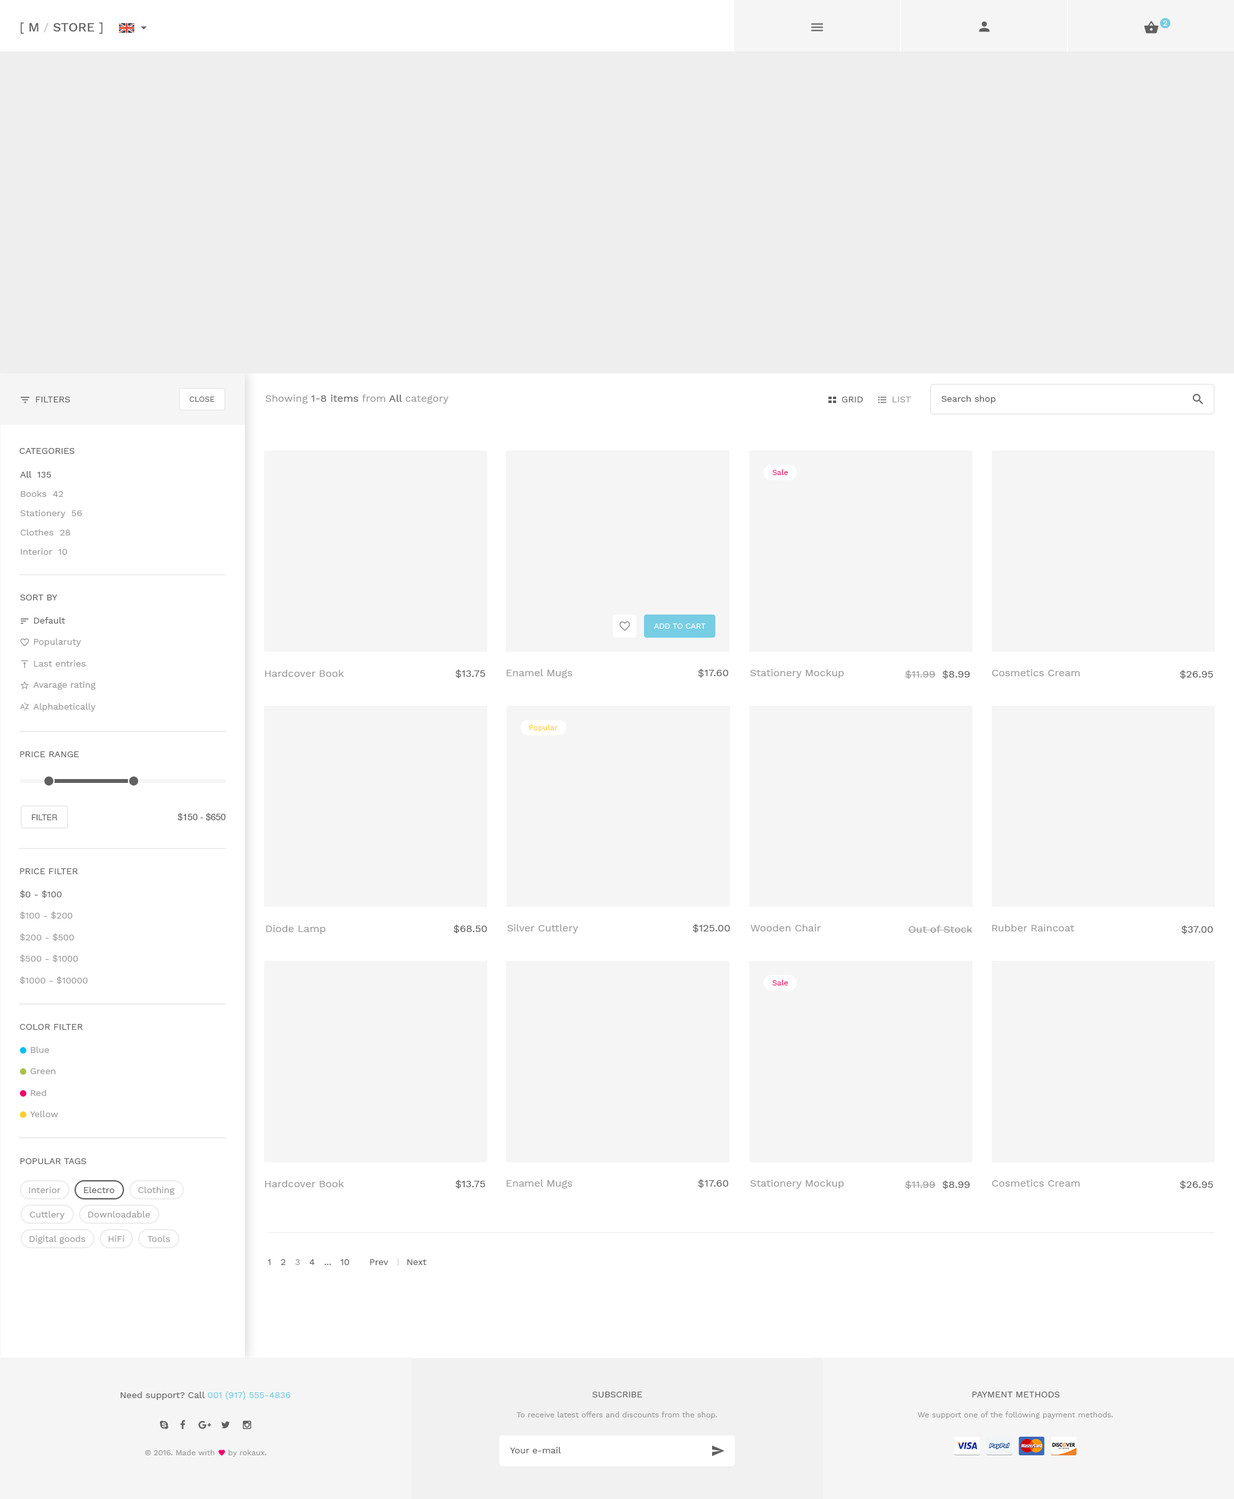
<style>
.page{position:relative;width:1234px;height:1499px;background:#f5f5f5}
.page>*{position:absolute;margin:0}
.t1{font:12.9px "WorkSans-Medium";color:#606060}
.t2{font:12.9px "WorkSans-Regular";color:#606060}
.t3{font:11.6px "WorkSans-Regular";color:#bababa}
.t4{font:7.7px "WorkSans-Regular";color:#fffefe}
.t5{font:9px "WorkSans-Regular";color:#606060;text-transform:uppercase}
.t6{font:7.7px "WorkSans-Regular";color:#606060;text-transform:uppercase}
.t7{font:10.3px "WorkSans-Regular";color:#606060}
.t8{font:10.3px "WorkSans-Regular";color:#999999}
.t9{font:9px "WorkSans-Regular";color:#999999;text-transform:uppercase}
.t10{font:9px "WorkSans-Regular";color:#606060}
.t11{font:9px/19.3px "WorkSans-Regular";color:#999999}
.t12{font:9px/19.3px "WorkSans-Regular";color:#606060}
.t13{font:7.7px "WorkSans-Regular";color:#ef0568}
.t14{font:9px "WorkSans-Regular";color:#999999}
.t15{font:7.7px "WorkSans-Regular";color:#ffffff;text-transform:uppercase}
.t16{font:7.7px "WorkSans-Regular";color:#ffce2b}
.t17{font:7.7px "Helvetica";color:#606060;text-transform:uppercase}
.t18{font:9px "Helvetica";color:#606060;text-transform:uppercase}
.t19{font:9px "WorkSans-Regular";color:#77cde3}
.t20{font:7.7px "WorkSans-Regular";color:#999999}
</style>
<div class="page">
<p class="t1" style="left:21px;top:22px;width:82px;height:12px"><span class="t2">[</span> M <span class="t3">/ </span>STORE <span class="t2">]</span></p>
<p class="t4" style="left:1164px;top:21px;width:3px;height:5px">2</p>
<p class="t5" style="left:36px;top:397px;width:34px;height:5px">Filters</p>
<p class="t6" style="left:190px;top:397px;width:25px;height:5px">Close</p>
<p class="t7" style="left:266px;top:395px;width:183px;height:9px"><span class="t8">Showing </span>1-8 items<span class="t8"> from </span>All<span class="t8"> category</span></p>
<p class="t5" style="left:842px;top:397px;width:21px;height:5px">Grid</p>
<p class="t9" style="left:892px;top:397px;width:19px;height:5px">List</p>
<p class="t10" style="left:942px;top:395px;width:54px;height:9px">Search shop</p>
<p class="t5" style="left:19px;top:448px;width:56px;height:6px">Categories</p>
<p class="t11" style="left:20px;top:471px;width:62px;height:84px"><span class="t12">All  135<br></span>Books  42<br>Stationery  56<br>Clothes  28<br>Interior  10</p>
<p class="t13" style="left:773px;top:469px;width:15px;height:6px">Sale</p>
<p class="t5" style="left:20px;top:595px;width:37px;height:5px">Sort By</p>
<p class="t14" style="left:33px;top:617px;width:63px;height:95px"><span class="t10">Default<br><br></span>Popularuty<br><br>Last entries<br><br>Avarage rating<br><br>Alphabetically</p>
<p class="t15" style="left:654px;top:624px;width:52px;height:5px">Add To Cart</p>
<p class="t8" style="left:265px;top:670px;width:79px;height:7px">Hardcover Book</p>
<p class="t7" style="left:455px;top:669px;width:30px;height:9px">$13.75</p>
<p class="t8" style="left:507px;top:669px;width:66px;height:9px">Enamel Mugs</p>
<p class="t7" style="left:698px;top:669px;width:30px;height:9px">$17.60</p>
<p class="t8" style="left:750px;top:669px;width:94px;height:9px">Stationery Mockup</p>
<p class="t8" style="left:905px;top:670px;width:31px;height:9px">$11.99</p>
<p class="t7" style="left:942px;top:670px;width:28px;height:9px">$8.99</p>
<p class="t8" style="left:992px;top:669px;width:88px;height:7px">Cosmetics Cream</p>
<p class="t7" style="left:1180px;top:670px;width:34px;height:9px">$26.95</p>
<p class="t16" style="left:529px;top:724px;width:29px;height:8px">Popular</p>
<p class="t5" style="left:20px;top:752px;width:59px;height:5px">Price Range</p>
<p class="t17" style="left:32px;top:815px;width:25px;height:5px">Filter</p>
<p class="t18" style="left:177px;top:813px;width:49px;height:8px">$150 - $650</p>
<p class="t5" style="left:20px;top:869px;width:58px;height:5px">Price Filter</p>
<p class="t14" style="left:20px;top:890px;width:68px;height:94px"><span class="t10">$0 - $100<br><br></span>$100 - $200<br><br>$200 - $500<br><br>$500 - $1000<br><br>$1000 - $10000</p>
<p class="t8" style="left:266px;top:925px;width:60px;height:9px">Diode Lamp</p>
<p class="t7" style="left:453px;top:924px;width:34px;height:9px">$68.50</p>
<p class="t8" style="left:507px;top:924px;width:72px;height:9px">Silver Cuttlery</p>
<p class="t7" style="left:693px;top:924px;width:37px;height:9px">$125.00</p>
<p class="t8" style="left:751px;top:924px;width:70px;height:8px">Wooden Chair</p>
<p class="t8" style="left:908px;top:926px;width:65px;height:7px">Out of Stock</p>
<p class="t8" style="left:992px;top:924px;width:83px;height:8px">Rubber Raincoat</p>
<p class="t7" style="left:1182px;top:925px;width:31px;height:9px">$37.00</p>
<p class="t13" style="left:773px;top:980px;width:15px;height:6px">Sale</p>
<p class="t5" style="left:20px;top:1024px;width:63px;height:6px">Color Filter</p>
<p class="t14" style="left:30px;top:1047px;width:29px;height:70px">Blue<br><br>Green<br><br>Red<br><br>Yellow</p>
<p class="t5" style="left:20px;top:1158px;width:66px;height:6px">Popular Tags</p>
<p class="t8" style="left:265px;top:1180px;width:79px;height:7px">Hardcover Book</p>
<p class="t7" style="left:455px;top:1180px;width:30px;height:9px">$13.75</p>
<p class="t8" style="left:507px;top:1180px;width:66px;height:9px">Enamel Mugs</p>
<p class="t7" style="left:698px;top:1179px;width:30px;height:9px">$17.60</p>
<p class="t8" style="left:750px;top:1180px;width:94px;height:9px">Stationery Mockup</p>
<p class="t8" style="left:905px;top:1180px;width:31px;height:9px">$11.99</p>
<p class="t7" style="left:942px;top:1180px;width:28px;height:9px">$8.99</p>
<p class="t8" style="left:992px;top:1180px;width:88px;height:7px">Cosmetics Cream</p>
<p class="t7" style="left:1180px;top:1180px;width:34px;height:9px">$26.95</p>
<p class="t14" style="left:29px;top:1187px;width:31px;height:6px">Interior</p>
<p class="t10" style="left:84px;top:1187px;width:30px;height:6px">Electro</p>
<p class="t14" style="left:138px;top:1187px;width:37px;height:8px">Clothing</p>
<p class="t14" style="left:30px;top:1211px;width:35px;height:9px">Cuttlery</p>
<p class="t14" style="left:88px;top:1211px;width:62px;height:7px">Downloadable</p>
<p class="t14" style="left:30px;top:1236px;width:56px;height:8px">Digital goods</p>
<p class="t14" style="left:109px;top:1236px;width:16px;height:6px">HiFi</p>
<p class="t14" style="left:147px;top:1236px;width:23px;height:6px">Tools</p>
<p class="t10" style="left:267px;top:1259px;width:83px;height:6px">1   2   <span class="t14">3</span>   4   ...   10</p>
<p class="t10" style="left:370px;top:1259px;width:57px;height:6px">Prev      Next</p>
<p class="t10" style="left:120px;top:1391px;width:171px;height:9px">Need support? Call <span class="t19">001 (917) 555-4836</span></p>
<p class="t5" style="left:592px;top:1392px;width:51px;height:6px">Subscribe</p>
<p class="t5" style="left:973px;top:1392px;width:87px;height:6px">Payment Methods</p>
<p class="t20" style="left:517px;top:1412px;width:200px;height:7px">To receive latest offers and discounts from the shop.</p>
<p class="t20" style="left:918px;top:1412px;width:195px;height:7px">We support one of the following payment methods.</p>
<p class="t20" style="left:145px;top:1450px;width:122px;height:7px">© 2016. Made with     by rokaux.</p>
<p class="t10" style="left:510px;top:1447px;width:51px;height:7px">Your e-mail</p>
</div>
